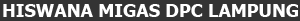
<style>
.page{position:relative;width:300px;height:21px;background:#333333}
.page>*{position:absolute;margin:0}
.t1{font:18px "Tahoma-Bold";color:#ffffff}
</style>
<div class="page">
<p class="t1" style="left:3px;top:4px;width:295px;height:13px">HISWANA MIGAS DPC LAMPUNG</p>
</div>
